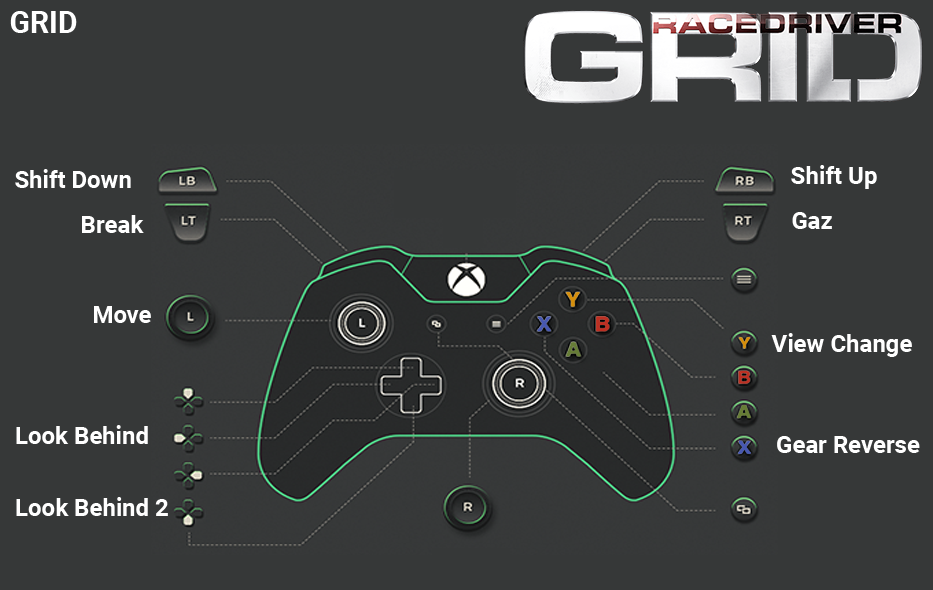
<style>
.page{position:relative;width:933px;height:590px;background:#363838}
.page>*{position:absolute;margin:0}
.t1{font:30px "Roboto-Bold";color:#ffffff}
.t2{font:24px "Roboto-Bold";color:#ffffff}
</style>
<div class="page">
<p class="t1" style="left:10px;top:11px;width:67px;height:22px">GRID</p>
<p class="t2" style="left:15px;top:169px;width:116px;height:19px">Shift Down</p>
<p class="t2" style="left:791px;top:165px;width:86px;height:24px">Shift Up</p>
<p class="t2" style="left:82px;top:215px;width:62px;height:18px">Break</p>
<p class="t2" style="left:792px;top:212px;width:40px;height:17px">Gaz</p>
<p class="t2" style="left:94px;top:306px;width:57px;height:17px">Move</p>
<p class="t2" style="left:771px;top:333px;width:141px;height:24px">View Change</p>
<p class="t2" style="left:16px;top:425px;width:132px;height:19px">Look Behind</p>
<p class="t2" style="left:777px;top:436px;width:143px;height:17px">Gear Reverse</p>
<p class="t2" style="left:16px;top:497px;width:152px;height:19px">Look Behind 2</p>
</div>
